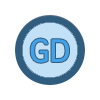
<style>
.page{position:relative;width:100px;height:100px;background:#ffffff}
.page>*{position:absolute;margin:0}
.t1{font:30px "Thonburi-Bold";color:#43a1e8}
</style>
<div class="page">
<p class="t1" style="left:30px;top:38px;width:39px;height:25px">GD</p>
</div>
